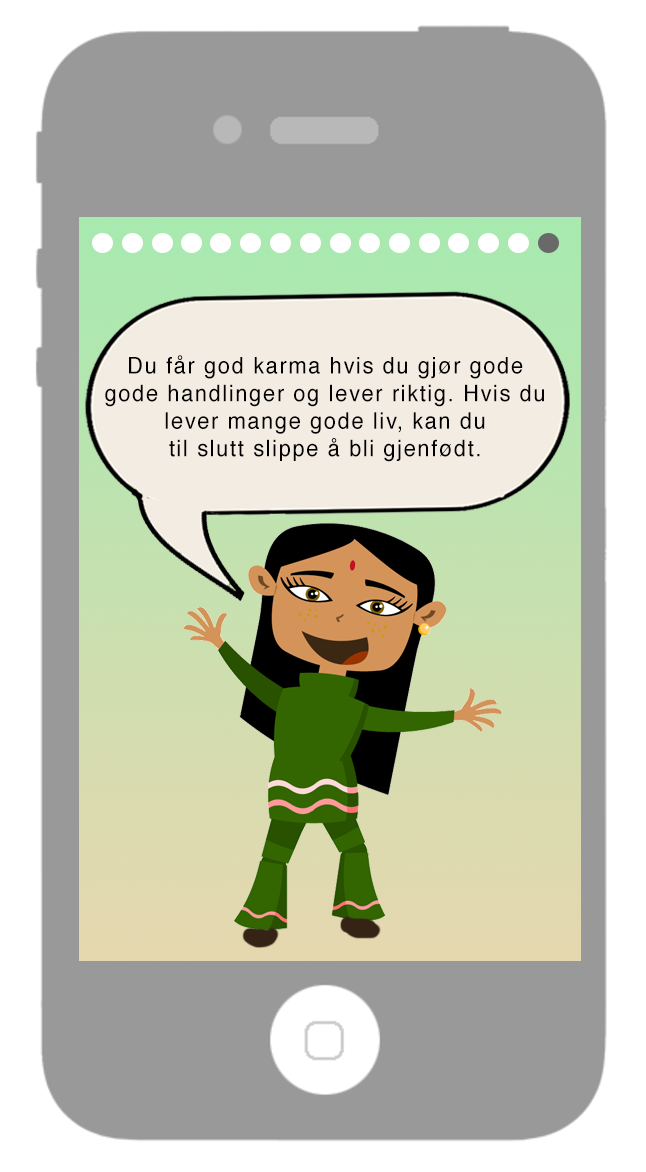
<style>
.page{position:relative;width:646px;height:1172px;background:#999999}
.page>*{position:absolute;margin:0}
.t1{font:11px "Helvetica";letter-spacing:0.075em;color:#010101;scale:0.95 1}
</style>
<div class="page">
<p class="t1" style="left:105px;top:355px;width:439px;height:107px;text-align:center">Du får god karma hvis du gjør gode<br>gode handlinger og lever riktig. Hvis du<br>lever mange gode liv, kan du<br>til slutt slippe å bli gjenfødt.</p>
</div>
